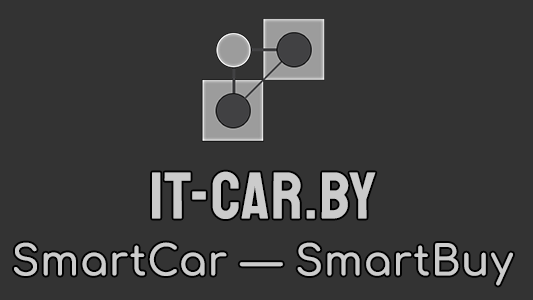
<style>
.page{position:relative;width:533px;height:300px;background:#333333}
.page>*{position:absolute;margin:0}
.t1{font:65.7px "Staatliches-Regular";letter-spacing:0.025em;color:#cbcbcb}
.t2{font:41.4px "Comfortaa-SemiBold";letter-spacing:0.025em;color:#cbcbcb}
</style>
<div class="page">
<p class="t1" style="left:152px;top:171px;width:224px;height:48px">it-car.by</p>
<p class="t2" style="left:14px;top:242px;width:499px;height:44px">SmartCar — SmartBuy</p>
</div>
